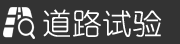
<style>
.page{position:relative;width:180px;height:44px;background:#333333}
.page>*{position:absolute;margin:0}
.t1{font:30px "YouYuan";color:#ffffff}
</style>
<div class="page">
<p class="t1" style="left:43px;top:9px;width:119px;height:28px">道路试验</p>
</div>
